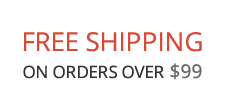
<style>
.page{position:relative;width:226px;height:110px;background:#ffffff}
.page>*{position:absolute;margin:0}
.t1{font:17px/24px "OpenSans";color:#333333}
.t2{font:26px/36.7px "OpenSans";color:#d84a38}
.t3{font:19px/26.8px "OpenSans";color:#666666}
</style>
<div class="page">
<p class="t1" style="left:23px;top:32px;width:179px;height:48px;text-align:center"><span class="t2">FREE SHIPPING<br></span>ON ORDERS OVER <span class="t3">$99</span></p>
</div>
